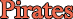
<style>
.page{position:relative;width:73px;height:19px;background:#ffffff}
.page>*{position:absolute;margin:0}
.t1{font:30px "Perpetua";color:#f06a4f}
</style>
<div class="page">
<p class="t1" style="left:0px;top:0px;width:73px;height:19px">Pirates</p>
</div>
